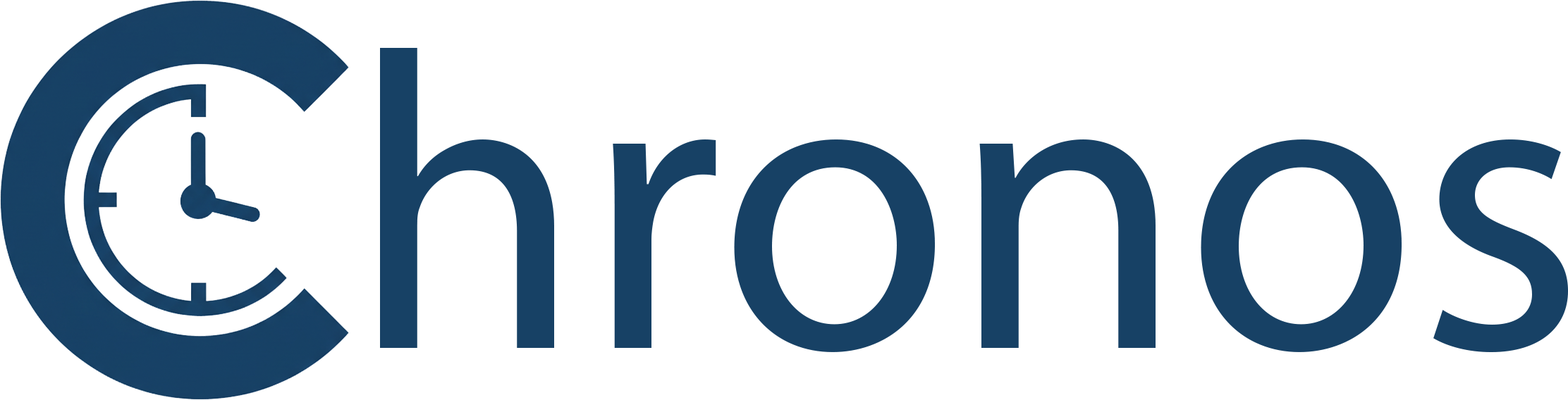
<style>
.page{position:relative;width:1568px;height:400px;background:#ffffff}
.page>*{position:absolute;margin:0}
.t1{font:423px "MyriadPro-Regular";color:#174165}
</style>
<div class="page">
<p class="t1" style="left:380px;top:48px;width:1188px;height:305px">hronos</p>
</div>
